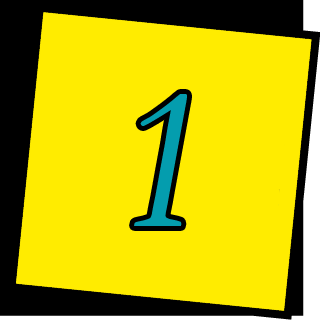
<style>
.page{position:relative;width:320px;height:320px;background:#ffec00}
.page>*{position:absolute;margin:0}
.t1{font:208.3px "Garamond";color:#049dae;font-style:italic}
</style>
<div class="page">
<p class="t1" style="left:134px;top:94px;width:53px;height:132px">1</p>
</div>
